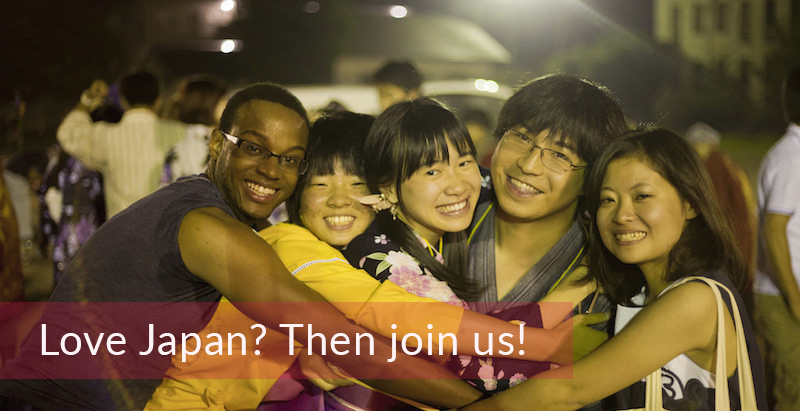
<style>
.page{position:relative;width:800px;height:411px}
.page>*{position:absolute;margin:0}
.t1{font:42px "Lato-Regular";letter-spacing:0.025em;color:#fff6f8}
</style>
<div class="page">
<p class="t1" style="left:41px;top:324px;width:484px;height:38px">Love Japan? Then join us!</p>
</div>
